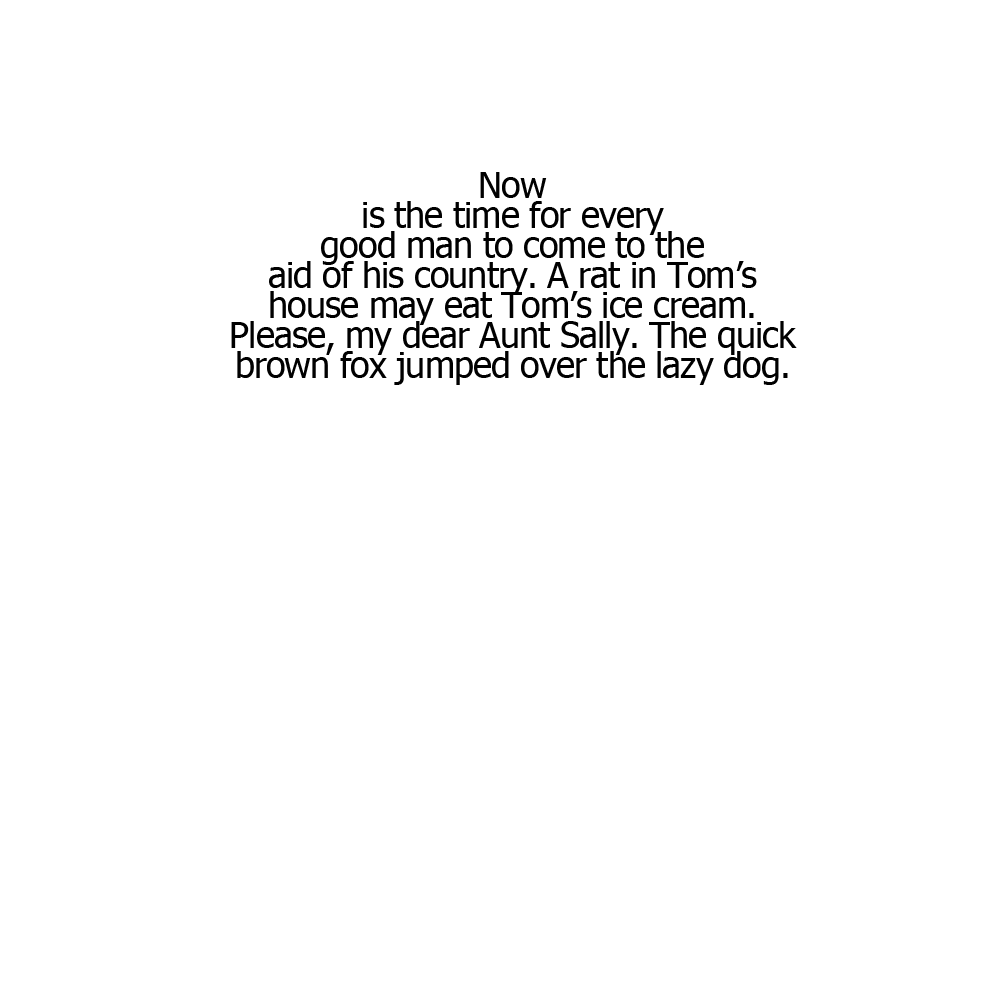
<style>
.page{position:relative;width:1000px;height:1000px;background:#ffffff}
.page>*{position:absolute;margin:0}
.t1{font:36px/30px "Tahoma";letter-spacing:-0.025em;color:#000000}
</style>
<div class="page">
<p class="t1" style="left:231px;top:172px;width:566px;height:213px;text-align:center">Now is the time for every good man to come to the aid of his country. A rat in Tom’s house may eat Tom’s ice cream. Please, my dear Aunt Sally. The quick brown fox jumped over the lazy dog.</p>
</div>
